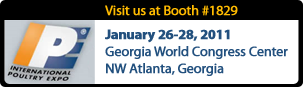
<style>
.page{position:relative;width:303px;height:87px;background:#ffffff}
.page>*{position:absolute;margin:0}
.t1{font:14px "MyriadPro-Regular";letter-spacing:-0.025em;color:#ffbb00;font-weight:bold}
.t2{font:14px "MyriadPro-Regular";letter-spacing:-0.025em;color:#22507e;font-weight:bold}
.t3{font:14px "MyriadPro-Bold";letter-spacing:-0.025em;color:#22507e;font-weight:bold}
</style>
<div class="page">
<p class="t1" style="left:105px;top:5px;width:133px;height:11px">Visit us at Booth #1829</p>
<p class="t2" style="left:105px;top:29px;width:183px;height:47px"><span class="t3">January 26-28, 2011<br></span>Georgia World Congress Center<br>NW Atlanta, Georgia</p>
</div>
